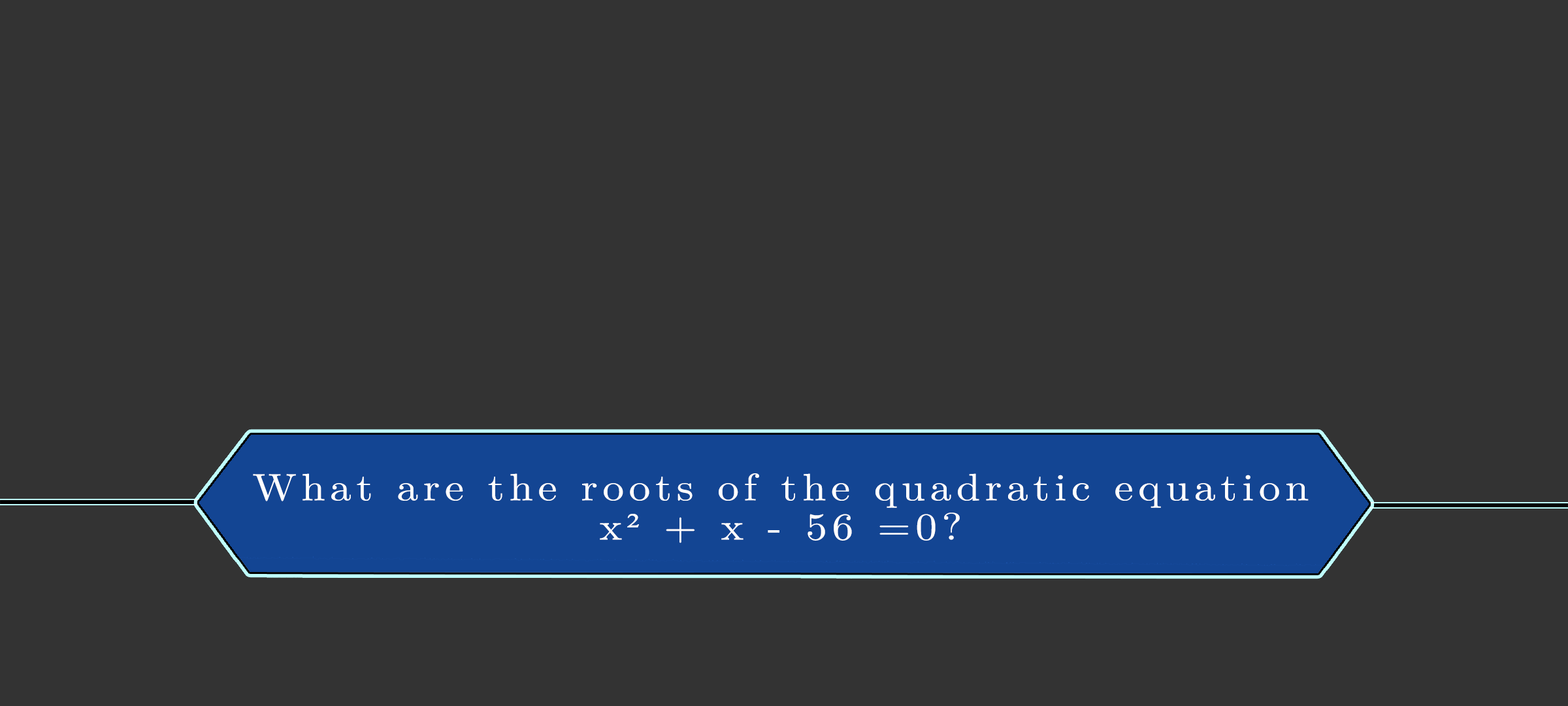
<style>
.page{position:relative;width:1568px;height:706px;background:#333333}
.page>*{position:absolute;margin:0}
.t1{font:38.1px/39.3px "LatinModernMath-Regular";letter-spacing:0.115em;color:#ffffff;scale:1.12 1}
.t2{font:38.1px/39.3px "TimesNewRomanPSMT";letter-spacing:0.115em;color:#ffffff;scale:1.12 1}
</style>
<div class="page">
<p class="t1" style="left:253px;top:473px;width:1056px;height:70px;text-align:center">What are the roots of the quadratic equation<br>x<span class="t2">²</span> + x - 56 =0?</p>
</div>
